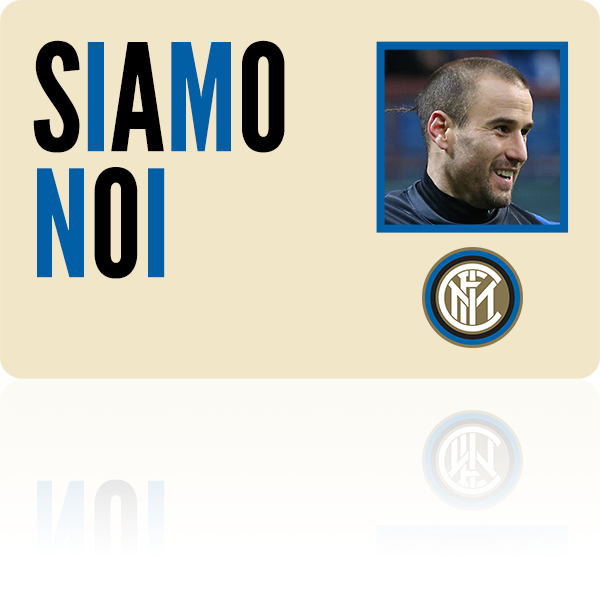
<style>
.page{position:relative;width:600px;height:603px;background:#f1e6c8}
.page>*{position:absolute;margin:0}
.t1{font:148.2px/126.1px "LeagueGothic"}
</style>
<div class="page">
<p class="t1" style="left:33px;top:40px;width:252px;height:239px">SIAMO<br>NOI</p>
</div>
